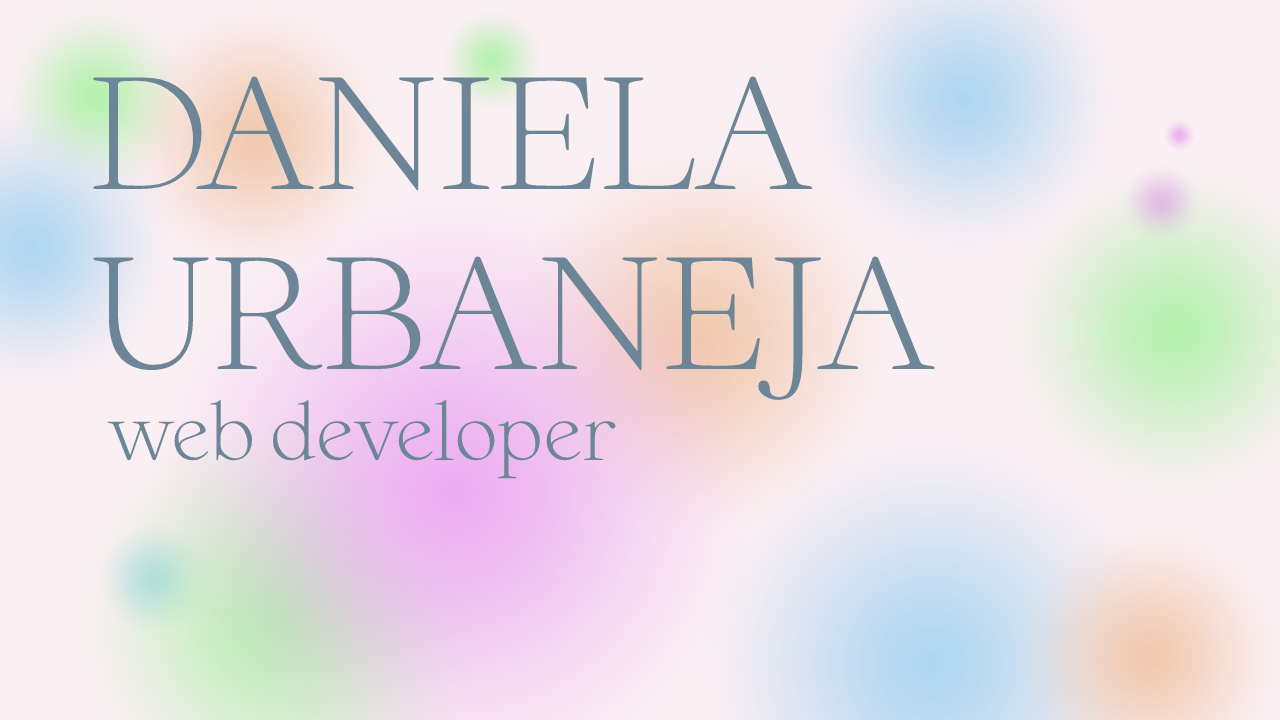
<style>
.page{position:relative;width:1280px;height:720px}
.page>*{position:absolute;margin:0}
.t1{font:150px "DTNightingale-Light";color:#6d8697}
.t2{font:80px "DTNightingale-Light";color:#6d8697}
</style>
<div class="page">
<p class="t1" style="left:93px;top:76px;width:842px;height:324px">DANIELA URBANEJA</p>
<p class="t2" style="left:107px;top:400px;width:509px;height:79px">web developer</p>
</div>
